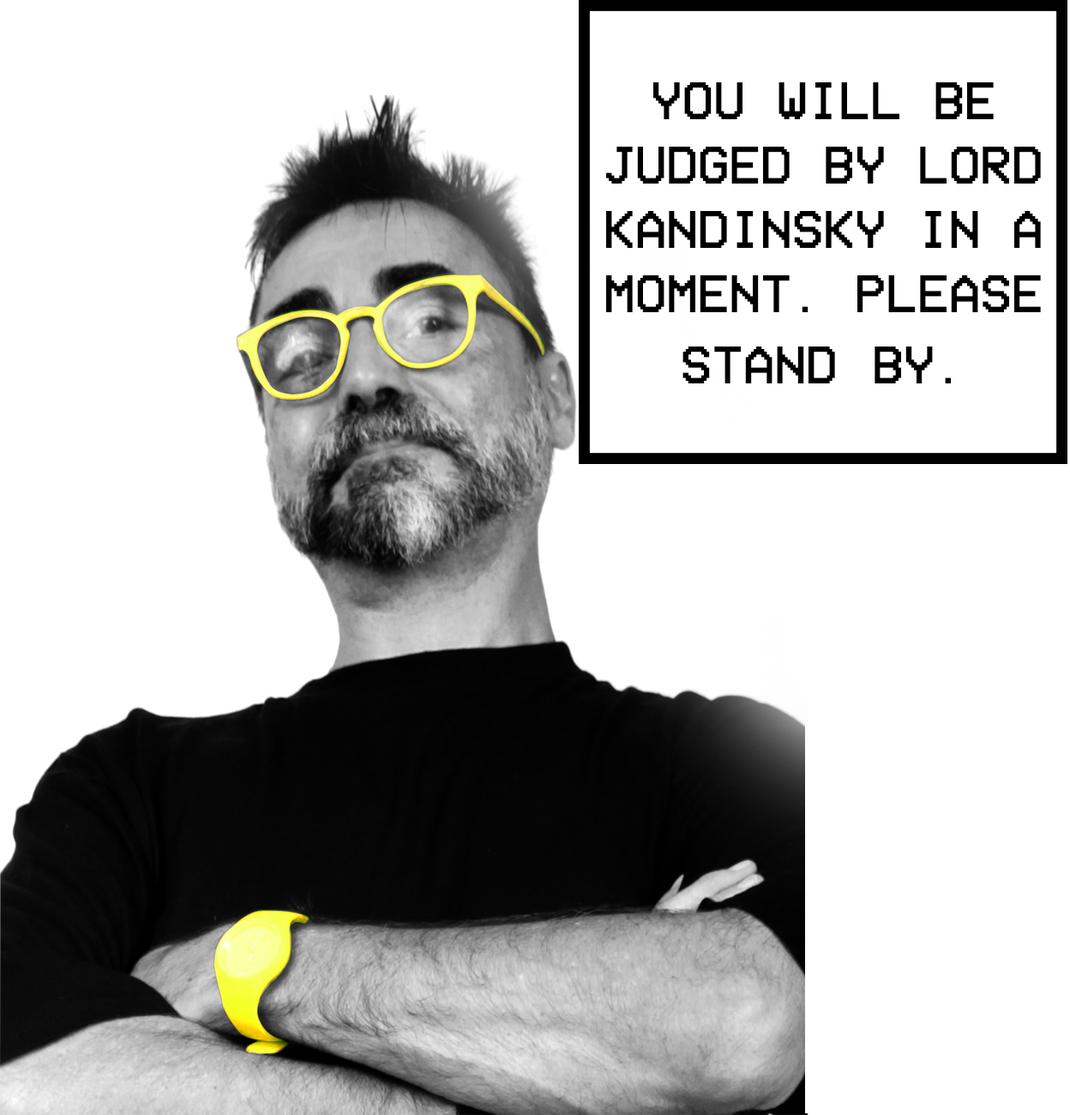
<style>
.page{position:relative;width:1070px;height:1115px;background:#ffffff}
.page>*{position:absolute;margin:0}
.t1{font:53.6px "VCROSDMono";color:#000000}
</style>
<div class="page">
<p class="t1" style="left:606px;top:82px;width:435px;height:301px;text-align:center">YOU WILL BE JUDGED BY LORD KANDINSKY IN A MOMENT. PLEASE STAND BY.</p>
</div>
